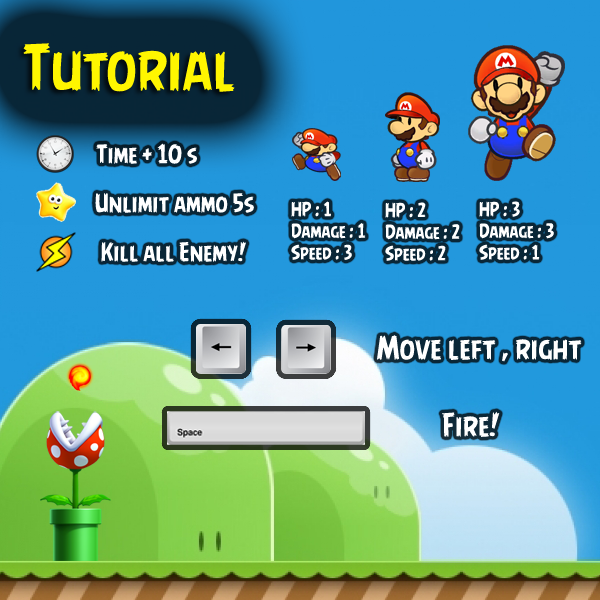
<style>
.page{position:relative;width:600px;height:600px}
.page>*{position:absolute;margin:0}
.t1{font:60px "AngryBirds-Regular";color:#fff600}
.t2{font:24px "AngryBirds-Regular";color:#ffffff}
.t3{font:18px "AngryBirds-Regular";color:#ffffff}
.t4{font:30px "AngryBirds-Regular";color:#ffffff}
</style>
<div class="page">
<p class="t1" style="left:23px;top:43px;width:212px;height:49px">Tutorial</p>
<p class="t2" style="left:96px;top:143px;width:101px;height:21px">Time + 10 s</p>
<p class="t2" style="left:95px;top:193px;width:159px;height:20px">Unlimit ammo 5s</p>
<p class="t3" style="left:291px;top:201px;width:75px;height:59px">HP : 1<br>Damage : 1<br>Speed : 3</p>
<p class="t3" style="left:385px;top:202px;width:75px;height:59px">HP : 2<br>Damage : 2<br>Speed : 2</p>
<p class="t3" style="left:479px;top:201px;width:75px;height:59px">HP : 3<br>Damage : 3<br>Speed : 1</p>
<p class="t2" style="left:101px;top:241px;width:145px;height:21px">Kill all Enemy!</p>
<p class="t4" style="left:377px;top:335px;width:205px;height:27px">Move left , right</p>
<p class="t4" style="left:442px;top:411px;width:58px;height:26px">Fire!</p>
</div>
